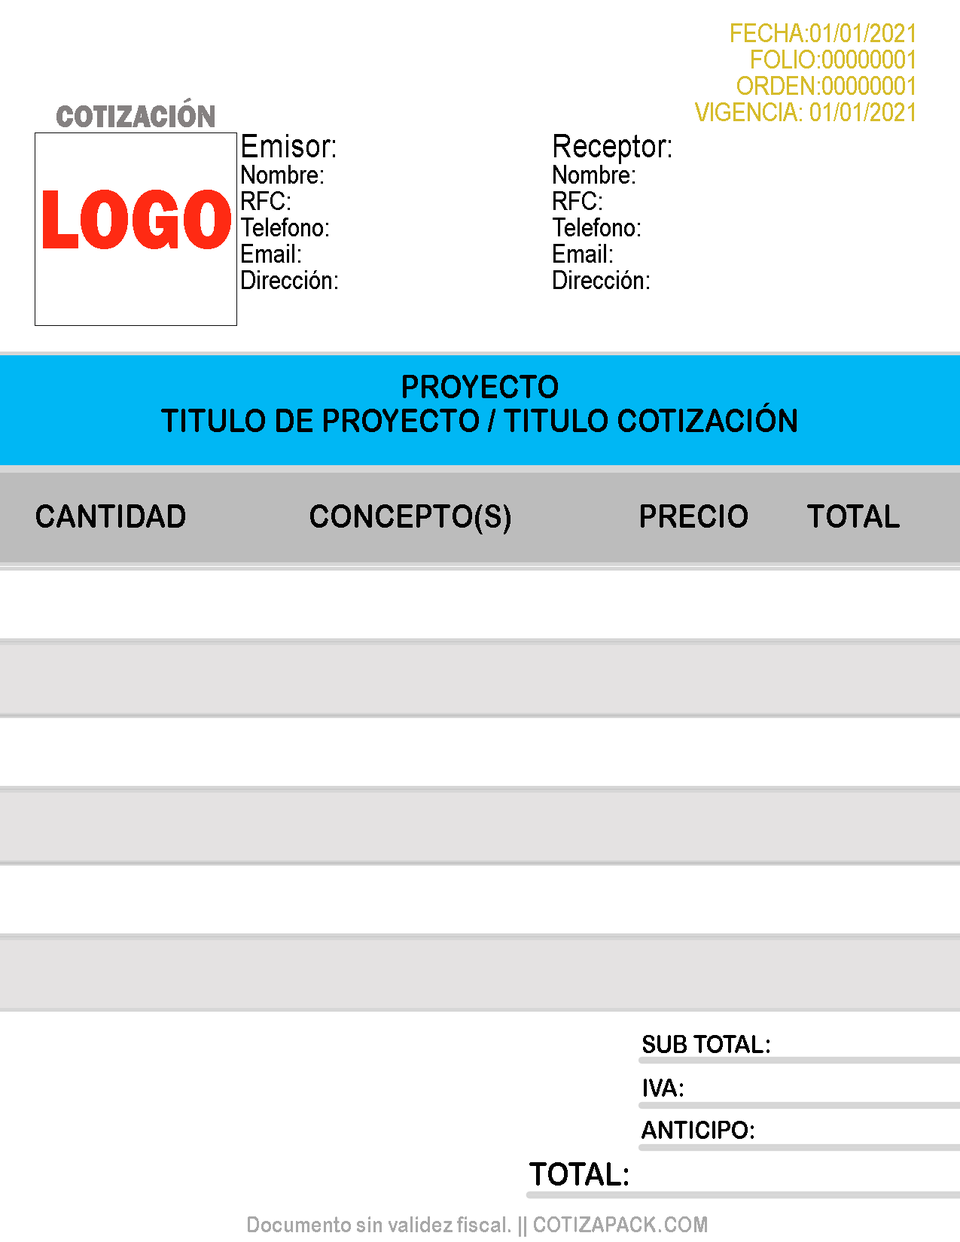
<style>
.page{position:relative;width:960px;height:1242px;background:#ffffff}
.page>*{position:absolute;margin:0}
.t1{font:25.3px "ArialMT";color:#d6bc2c;scale:0.87 1}
.t2{font:32.5px "FranklinGothic-Heavy";color:#858181;scale:0.87 1}
.t3{font:25.3px "ArialMT";color:#000000;scale:0.87 1}
.t4{font:32.5px "ArialMT";color:#000000;scale:0.87 1}
.t5{font:86.6px "FranklinGothic-Heavy";color:#ff2a13;scale:0.87 1}
.t6{font:32.5px "ArialRoundedMTBold";color:#010101;scale:0.87 1}
.t7{font:25.3px "ArialRoundedMTBold";color:#010101;scale:0.87 1}
.t8{font:21.6px "ArialRoundedMTBold";color:#a8a8a8;scale:0.87 1}
</style>
<div class="page">
<p class="t1" style="left:695px;top:23px;width:219px;height:98px;text-align:right">FECHA:01/01/2021<br>FOLIO:00000001<br>ORDEN:00000001<br>VIGENCIA: 01/01/2021</p>
<p class="t2" style="left:56px;top:98px;width:159px;height:29px">COTIZACIÓN</p>
<p class="t3" style="left:241px;top:134px;width:96px;height:155px"><span class="t4">Emisor:<br></span>Nombre:<br>RFC:<br>Telefono:<br>Email:<br>Dirección:</p>
<p class="t3" style="left:553px;top:134px;width:118px;height:155px"><span class="t4">Receptor:<br></span>Nombre:<br>RFC:<br>Telefono:<br>Email:<br>Dirección:</p>
<p class="t5" style="left:43px;top:190px;width:188px;height:59px">LOGO</p>
<p class="t6" style="left:161px;top:375px;width:636px;height:57px;text-align:center">PROYECTO<br>TITULO DE PROYECTO / TITULO COTIZACIÓN</p>
<p class="t6" style="left:36px;top:504px;width:149px;height:24px">CANTIDAD</p>
<p class="t6" style="left:310px;top:504px;width:200px;height:31px">CONCEPTO(S)</p>
<p class="t6" style="left:641px;top:504px;width:107px;height:24px">PRECIO</p>
<p class="t6" style="left:807px;top:504px;width:93px;height:24px">TOTAL</p>
<p class="t7" style="left:643px;top:1035px;width:126px;height:18px">SUB TOTAL:</p>
<p class="t7" style="left:644px;top:1079px;width:39px;height:18px">IVA:</p>
<p class="t7" style="left:641px;top:1121px;width:113px;height:18px">ANTICIPO:</p>
<p class="t6" style="left:529px;top:1162px;width:99px;height:24px">TOTAL:</p>
<p class="t8" style="left:248px;top:1217px;width:459px;height:20px">Documento sin validez fiscal. || COTIZAPACK.COM</p>
</div>
